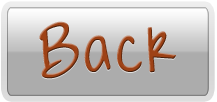
<style>
.page{position:relative;width:217px;height:102px;background:#acacac}
.page>*{position:absolute;margin:0}
.t1{font:63.4px "SharkintheWater-Bold";letter-spacing:0.05em;color:#9e4216}
</style>
<div class="page">
<p class="t1" style="left:39px;top:21px;width:137px;height:58px">Back</p>
</div>
